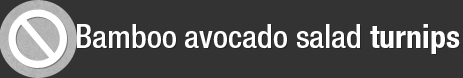
<style>
.page{position:relative;width:463px;height:78px;background:#333333}
.page>*{position:absolute;margin:0}
.t1{font:32.3px "HelveticaNeueLTPro-MdCn";color:#ffffff}
.t2{font:32.3px "HelveticaNeueLTPro-BdCn";color:#ffffff}
</style>
<div class="page">
<p class="t1" style="left:77px;top:24px;width:383px;height:30px">Bamboo avocado salad <span class="t2">turnips</span></p>
</div>
